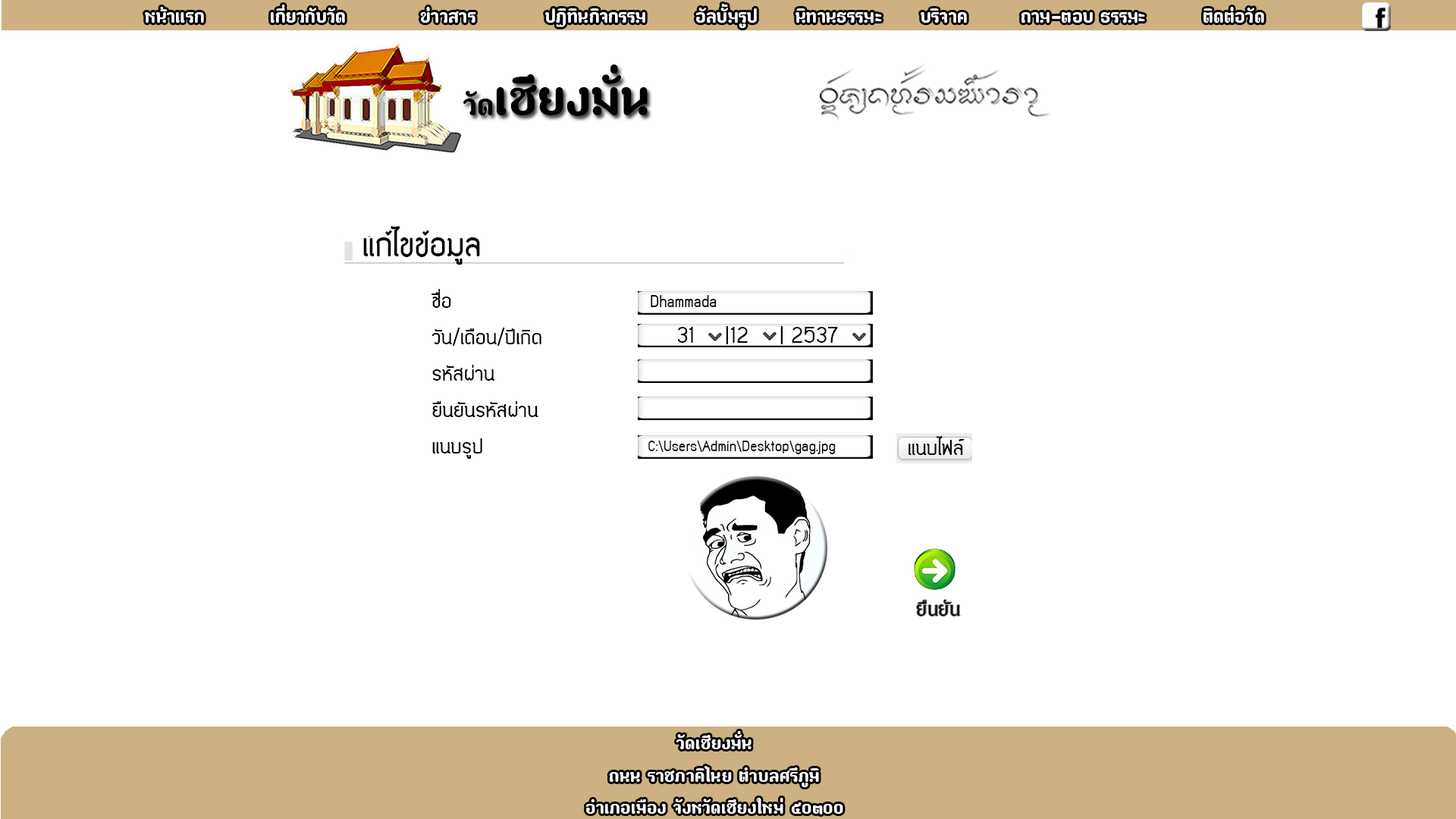
<style>
.page{position:relative;width:1456px;height:819px;background:#ffffff}
.page>*{position:absolute;margin:0}
.t1{font:27.3px "paaymaay";color:#f9f9f9}
.t2{font:73.6px "paaymaay";color:#000000}
.t3{font:44.2px "paaymaay";color:#000000}
.t4{font:36.4px "EDPenSook-NormalToneBold";color:#020202}
.t5{font:22.7px/36.4px "EDPenSook-NormalToneBold";color:#020202}
.t6{font:16.7px "EDPenSook-NormalToneBold";color:#020202}
.t7{font:22.7px "EDPenSook-NormalToneBold";color:#020202}
.t8{font:15.2px "EDPenSook-NormalToneBold";color:#020202}
.t9{font:27.3px "PGVIM";color:#020202}
.t10{font:26.9px "paaymaay";color:#fdfdfc}
</style>
<div class="page">
<p class="t1" style="left:145px;top:4px;width:1119px;height:24px">หน้าแรก    เกี่ยวกับวัด    ข่าวสาร    ปฏิทินกิจกรรม   อัลบั้มรูป  นิทานธรรมะ  บริจาค   ถาม-ตอบ ธรรมะ    ติดต่อวัด</p>
<p class="t2" style="left:463px;top:64px;width:185px;height:52px"><span class="t3">วัด</span>เชียงมั่น</p>
<p class="t4" style="left:363px;top:226px;width:117px;height:39px">แก้ไขข้อมูล</p>
<p class="t5" style="left:431px;top:289px;width:110px;height:170px;text-align:right">ชื่อ<br>วัน/เดือน/ปีเกิด<br>รหัสผ่าน<br>ยืนยันรหัสผ่าน<br>แนบรูป</p>
<p class="t6" style="left:651px;top:295px;width:66px;height:12px">Dhammada</p>
<p class="t7" style="left:677px;top:326px;width:161px;height:18px">2537 |  12 |  31</p>
<p class="t7" style="left:908px;top:436px;width:57px;height:19px">แนบไฟล์</p>
<p class="t8" style="left:648px;top:441px;width:188px;height:13px">C:\Users\Admin\Desktop\gag.jpg</p>
<p class="t9" style="left:917px;top:600px;width:43px;height:16px">ยืนยัน</p>
<p class="t10" style="left:585px;top:731px;width:258px;height:83px;text-align:center">วัดเชียงมั่น<br>ถนน ราชภาคิไนย ตำบลศรีภูมิ<br>อำเภอเมือง จังหวัดเชียงใหม่ ๕o๓oo</p>
</div>
